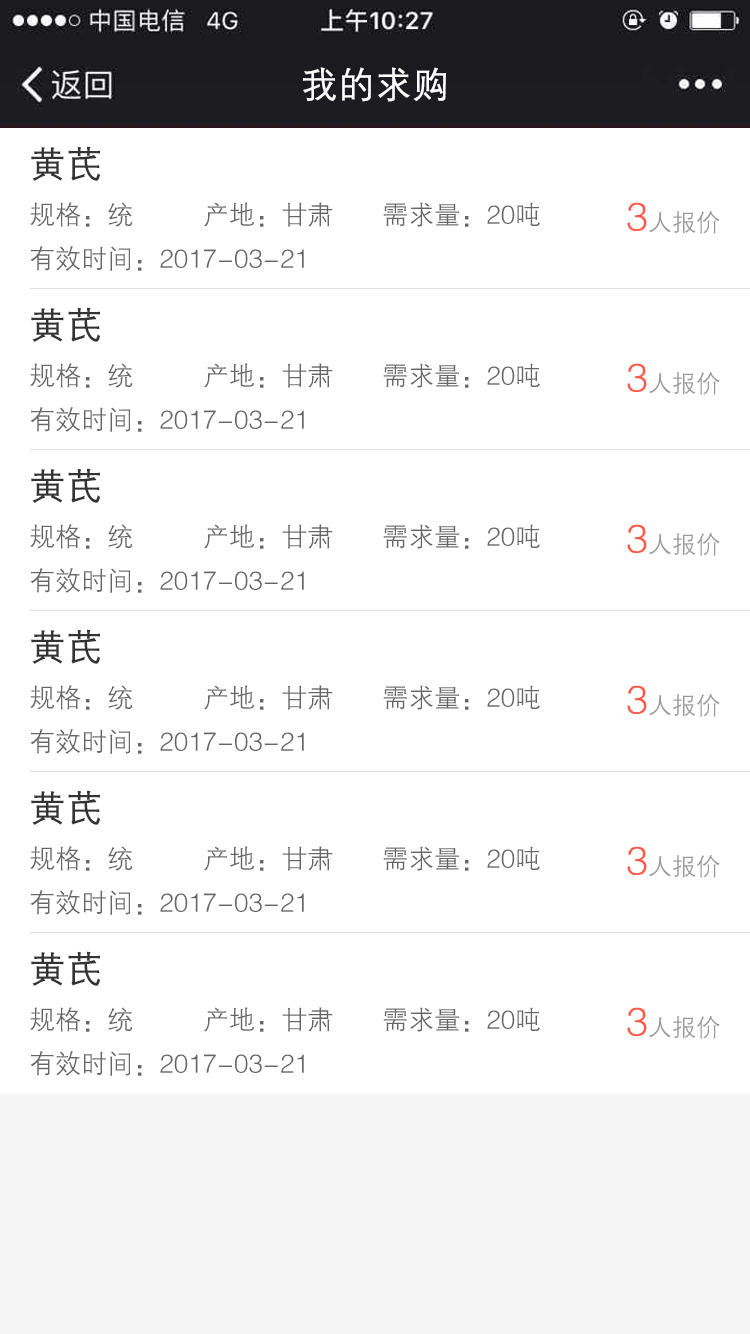
<style>
.page{position:relative;width:750px;height:1334px;background:#ffffff}
.page>*{position:absolute;margin:0}
.t1{font:36px "FZZDXJW--GB1-0";color:#ffffff;font-weight:bold}
.t2{font:36px "FZZDXJW--GB1-0";color:#333333;font-weight:bold}
.t3{font:26px "FZZDXJW--GB1-0";color:#666666}
.t4{font:24px "FZZDXJW--GB1-0";color:#999999}
.t5{font:40px "FZZDXJW--GB1-0";color:#ff5a49}
</style>
<div class="page">
<p class="t1" style="left:303px;top:67px;width:143px;height:35px">我的求购</p>
<p class="t2" style="left:31px;top:146px;width:69px;height:35px">黄芪</p>
<p class="t3" style="left:30px;top:202px;width:103px;height:25px">规格：统</p>
<p class="t3" style="left:204px;top:202px;width:129px;height:25px">产地：甘肃</p>
<p class="t3" style="left:383px;top:202px;width:157px;height:25px">需求量：20吨</p>
<p class="t4" style="left:627px;top:202px;width:93px;height:32px"><span class="t5">3</span>人报价</p>
<p class="t3" style="left:30px;top:246px;width:274px;height:25px">有效时间：2017-03-21</p>
<p class="t2" style="left:31px;top:307px;width:69px;height:35px">黄芪</p>
<p class="t3" style="left:30px;top:363px;width:103px;height:25px">规格：统</p>
<p class="t3" style="left:204px;top:363px;width:129px;height:25px">产地：甘肃</p>
<p class="t3" style="left:383px;top:363px;width:157px;height:25px">需求量：20吨</p>
<p class="t4" style="left:627px;top:363px;width:93px;height:32px"><span class="t5">3</span>人报价</p>
<p class="t3" style="left:30px;top:407px;width:274px;height:25px">有效时间：2017-03-21</p>
<p class="t2" style="left:31px;top:468px;width:69px;height:35px">黄芪</p>
<p class="t3" style="left:30px;top:524px;width:103px;height:25px">规格：统</p>
<p class="t3" style="left:204px;top:524px;width:129px;height:25px">产地：甘肃</p>
<p class="t3" style="left:383px;top:524px;width:157px;height:25px">需求量：20吨</p>
<p class="t4" style="left:627px;top:524px;width:93px;height:32px"><span class="t5">3</span>人报价</p>
<p class="t3" style="left:30px;top:568px;width:274px;height:25px">有效时间：2017-03-21</p>
<p class="t2" style="left:31px;top:629px;width:69px;height:35px">黄芪</p>
<p class="t3" style="left:30px;top:685px;width:103px;height:25px">规格：统</p>
<p class="t3" style="left:204px;top:685px;width:129px;height:25px">产地：甘肃</p>
<p class="t3" style="left:383px;top:685px;width:157px;height:25px">需求量：20吨</p>
<p class="t4" style="left:627px;top:685px;width:93px;height:32px"><span class="t5">3</span>人报价</p>
<p class="t3" style="left:30px;top:729px;width:274px;height:25px">有效时间：2017-03-21</p>
<p class="t2" style="left:31px;top:790px;width:69px;height:35px">黄芪</p>
<p class="t3" style="left:30px;top:846px;width:103px;height:25px">规格：统</p>
<p class="t3" style="left:204px;top:846px;width:129px;height:25px">产地：甘肃</p>
<p class="t3" style="left:383px;top:846px;width:157px;height:25px">需求量：20吨</p>
<p class="t4" style="left:627px;top:846px;width:93px;height:32px"><span class="t5">3</span>人报价</p>
<p class="t3" style="left:30px;top:890px;width:274px;height:25px">有效时间：2017-03-21</p>
<p class="t2" style="left:31px;top:951px;width:69px;height:35px">黄芪</p>
<p class="t3" style="left:30px;top:1007px;width:103px;height:25px">规格：统</p>
<p class="t3" style="left:204px;top:1007px;width:129px;height:25px">产地：甘肃</p>
<p class="t3" style="left:383px;top:1007px;width:157px;height:25px">需求量：20吨</p>
<p class="t4" style="left:627px;top:1007px;width:93px;height:32px"><span class="t5">3</span>人报价</p>
<p class="t3" style="left:30px;top:1051px;width:274px;height:25px">有效时间：2017-03-21</p>
</div>
